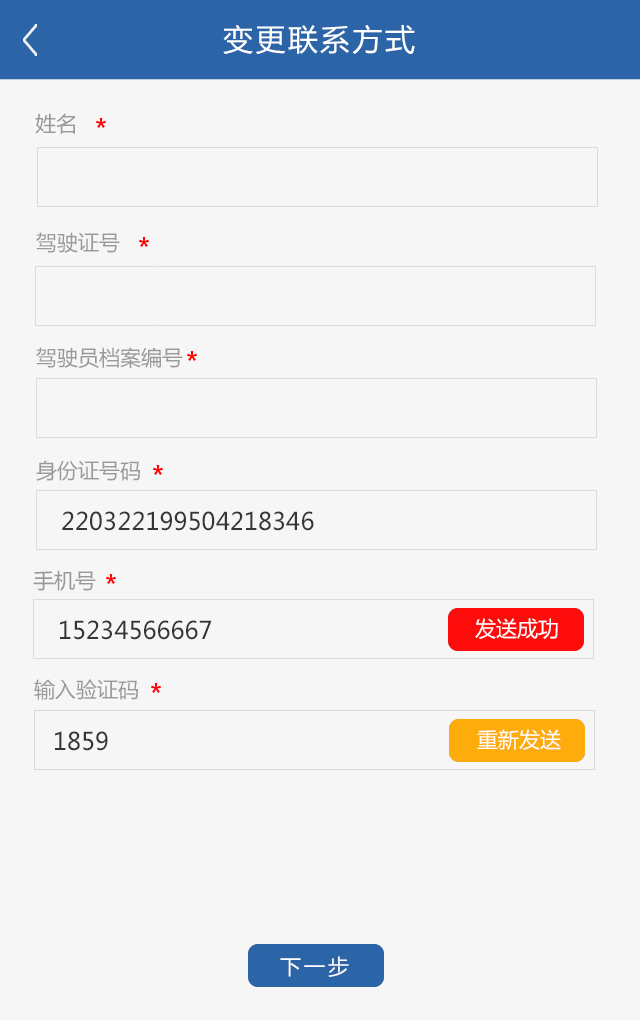
<style>
.page{position:relative;width:640px;height:1020px;background:#f6f6f6}
.page>*{position:absolute;margin:0}
.t1{font:30px "MicrosoftYaHei";letter-spacing:0.08em;color:#ffffff}
.t2{font:21px "MicrosoftYaHei";color:#999999}
.t3{font:24px "MicrosoftYaHei";color:#353535}
.t4{font:21px "MicrosoftYaHei";color:#ffffff}
.t5{font:21px "MicrosoftYaHei";letter-spacing:0.14em;color:#ffffff}
</style>
<div class="page">
<p class="t1" style="left:223px;top:25px;width:192px;height:29px">变更联系方式</p>
<p class="t2" style="left:35px;top:113px;width:40px;height:21px">姓名</p>
<p class="t2" style="left:36px;top:232px;width:84px;height:21px">驾驶证号</p>
<p class="t2" style="left:36px;top:347px;width:147px;height:21px">驾驶员档案编号</p>
<p class="t2" style="left:36px;top:460px;width:104px;height:21px">身份证号码</p>
<p class="t3" style="left:62px;top:511px;width:252px;height:20px">220322199504218346</p>
<p class="t2" style="left:33px;top:570px;width:63px;height:21px">手机号</p>
<p class="t3" style="left:60px;top:620px;width:152px;height:20px">15234566667</p>
<p class="t4" style="left:475px;top:618px;width:83px;height:21px">发送成功</p>
<p class="t2" style="left:34px;top:679px;width:104px;height:21px">输入验证码</p>
<p class="t3" style="left:55px;top:731px;width:53px;height:20px">1859</p>
<p class="t4" style="left:477px;top:729px;width:84px;height:21px">重新发送</p>
<p class="t5" style="left:280px;top:956px;width:69px;height:21px">下一步</p>
</div>
